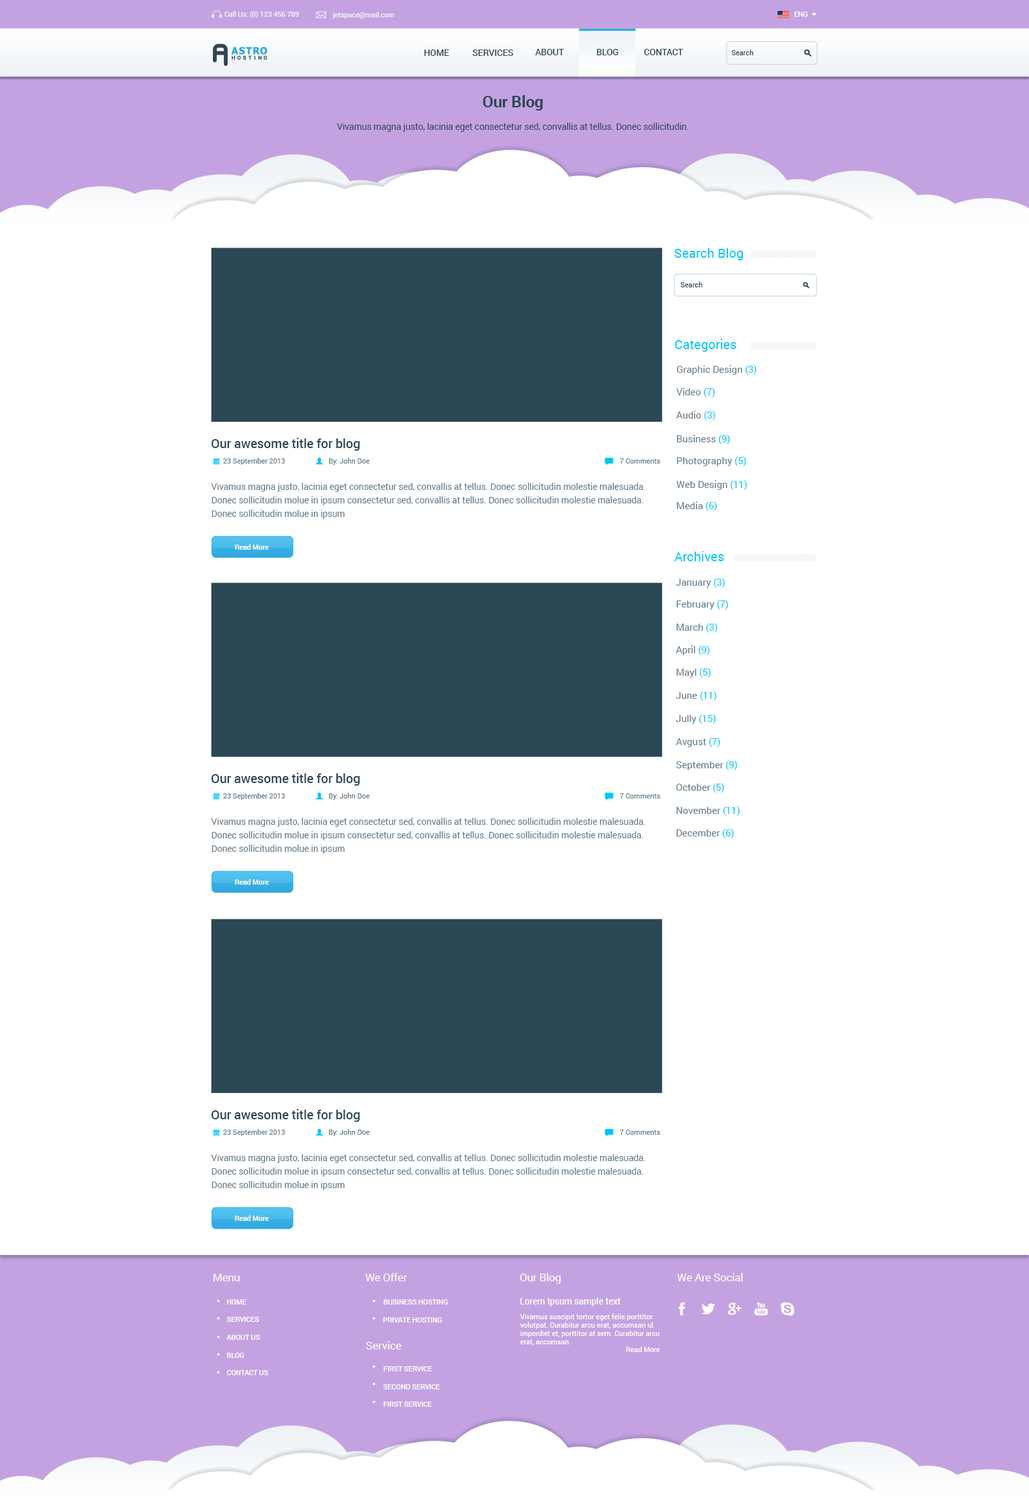
<style>
.page{position:relative;width:1029px;height:1498px;background:#ffffff}
.page>*{position:absolute;margin:0}
.t1{font:7.1px "Roboto-Medium";letter-spacing:-0.01em;color:#edf2f6}
.t2{font:7.1px "Roboto-Medium";letter-spacing:-0.01em;color:#ffffff}
.t3{font:9px "Roboto-Medium";letter-spacing:-0.01em;color:#2c4755}
.t4{font:7.1px "Roboto-Regular";color:#2c4755}
.t5{font:16.1px "Roboto-Bold";letter-spacing:-0.01em;color:#2c4755}
.t6{font:9px "Roboto-Regular";letter-spacing:-0.01em;color:#2c4755}
.t7{font:12.9px "Roboto-Regular";color:#00c7fc}
.t8{font:9.6px "Roboto-Regular";color:#637988}
.t9{font:9.6px "Roboto-Regular";color:#00c7fc}
.t10{font:12.9px "Roboto-Medium";letter-spacing:-0.01em;color:#2c4755}
.t11{font:7.1px "Roboto-Regular";color:#637988}
.t12{font:9px/13.5px "Roboto-Regular";letter-spacing:-0.01em;color:#637988}
.t13{font:10.9px "Roboto-Regular";letter-spacing:-0.01em;color:#ffffff}
.t14{font:9px "Roboto-Medium";letter-spacing:-0.01em;color:#ffffff}
.t15{font:7.1px "Roboto-Regular";color:#ffffff}
.t16{font:7.1px "Roboto-Regular";letter-spacing:-0.01em;color:#ffffff}
</style>
<div class="page">
<p class="t1" style="left:224px;top:11px;width:75px;height:7px">Call Us: (0) 123 456 789</p>
<p class="t1" style="left:332px;top:12px;width:62px;height:7px">jetspace@mail.com</p>
<p class="t2" style="left:794px;top:12px;width:13px;height:5px">ENG</p>
<p class="t3" style="left:424px;top:50px;width:25px;height:6px">HOME</p>
<p class="t3" style="left:473px;top:50px;width:40px;height:6px">SERVICES</p>
<p class="t3" style="left:535px;top:49px;width:29px;height:6px">ABOUT</p>
<p class="t3" style="left:597px;top:49px;width:21px;height:6px">BLOG</p>
<p class="t3" style="left:644px;top:49px;width:39px;height:6px">CONTACT</p>
<p class="t4" style="left:731px;top:50px;width:22px;height:5px">Search</p>
<p class="t5" style="left:483px;top:95px;width:60px;height:16px">Our Blog</p>
<p class="t6" style="left:337px;top:123px;width:351px;height:9px">Vivamus magna justo, lacinia eget consectetur sed, convallis at tellus. Donec sollicitudin.</p>
<p class="t7" style="left:674px;top:248px;width:69px;height:12px">Search Blog</p>
<p class="t4" style="left:680px;top:282px;width:22px;height:5px">Search</p>
<p class="t7" style="left:674px;top:339px;width:62px;height:13px">Categories</p>
<p class="t8" style="left:676px;top:365px;width:80px;height:10px">Graphic Design <span class="t9">(3)</span></p>
<p class="t8" style="left:676px;top:388px;width:39px;height:9px">Video <span class="t9">(7)</span></p>
<p class="t8" style="left:676px;top:411px;width:39px;height:9px">Audio <span class="t9">(3)</span></p>
<p class="t10" style="left:212px;top:438px;width:148px;height:13px">Our awesome title for blog</p>
<p class="t8" style="left:676px;top:435px;width:54px;height:9px">Business <span class="t9">(9)</span></p>
<p class="t11" style="left:223px;top:458px;width:62px;height:7px">23 September 2013</p>
<p class="t11" style="left:328px;top:458px;width:42px;height:7px">By: John Doe</p>
<p class="t11" style="left:620px;top:458px;width:40px;height:6px">7 Comments</p>
<p class="t8" style="left:676px;top:456px;width:70px;height:10px">Photography <span class="t9">(5)</span></p>
<p class="t12" style="left:211px;top:483px;width:434px;height:36px">Vivamus magna justo, lacinia eget consectetur sed, convallis at tellus. Donec sollicitudin molestie malesuada. <br>Donec sollicitudin molue in ipsum consectetur sed, convallis at tellus. Donec sollicitudin molestie malesuada. <br>Donec sollicitudin molue in ipsum</p>
<p class="t8" style="left:676px;top:480px;width:71px;height:10px">Web Design <span class="t9">(11)</span></p>
<p class="t8" style="left:676px;top:501px;width:41px;height:10px">Media <span class="t9">(6)</span></p>
<p class="t2" style="left:235px;top:544px;width:34px;height:6px">Read More</p>
<p class="t7" style="left:674px;top:551px;width:50px;height:10px">Archives</p>
<p class="t8" style="left:676px;top:578px;width:48px;height:10px">January <span class="t9">(3)</span></p>
<p class="t8" style="left:676px;top:600px;width:52px;height:9px">February <span class="t9">(7)</span></p>
<p class="t8" style="left:676px;top:623px;width:41px;height:10px">March <span class="t9">(3)</span></p>
<p class="t8" style="left:676px;top:645px;width:34px;height:10px">April <span class="t9">(9)</span></p>
<p class="t8" style="left:676px;top:668px;width:34px;height:10px">Mayl <span class="t9">(5)</span></p>
<p class="t8" style="left:676px;top:691px;width:40px;height:10px">June <span class="t9">(11)</span></p>
<p class="t8" style="left:676px;top:714px;width:40px;height:10px">Jully <span class="t9">(15)</span></p>
<p class="t8" style="left:676px;top:737px;width:44px;height:10px">Avgust <span class="t9">(7)</span></p>
<p class="t8" style="left:676px;top:760px;width:61px;height:10px">September <span class="t9">(9)</span></p>
<p class="t10" style="left:212px;top:773px;width:148px;height:13px">Our awesome title for blog</p>
<p class="t8" style="left:676px;top:783px;width:48px;height:10px">October <span class="t9">(5)</span></p>
<p class="t11" style="left:223px;top:793px;width:62px;height:7px">23 September 2013</p>
<p class="t11" style="left:328px;top:793px;width:42px;height:7px">By: John Doe</p>
<p class="t11" style="left:620px;top:793px;width:40px;height:5px">7 Comments</p>
<p class="t8" style="left:676px;top:806px;width:63px;height:10px">November <span class="t9">(11)</span></p>
<p class="t12" style="left:211px;top:818px;width:434px;height:36px">Vivamus magna justo, lacinia eget consectetur sed, convallis at tellus. Donec sollicitudin molestie malesuada. <br>Donec sollicitudin molue in ipsum consectetur sed, convallis at tellus. Donec sollicitudin molestie malesuada. <br>Donec sollicitudin molue in ipsum</p>
<p class="t8" style="left:676px;top:829px;width:58px;height:9px">December <span class="t9">(6)</span></p>
<p class="t2" style="left:235px;top:879px;width:34px;height:6px">Read More</p>
<p class="t10" style="left:212px;top:1109px;width:148px;height:13px">Our awesome title for blog</p>
<p class="t11" style="left:223px;top:1129px;width:62px;height:7px">23 September 2013</p>
<p class="t11" style="left:328px;top:1129px;width:42px;height:7px">By: John Doe</p>
<p class="t11" style="left:620px;top:1130px;width:40px;height:5px">7 Comments</p>
<p class="t12" style="left:211px;top:1154px;width:434px;height:36px">Vivamus magna justo, lacinia eget consectetur sed, convallis at tellus. Donec sollicitudin molestie malesuada. <br>Donec sollicitudin molue in ipsum consectetur sed, convallis at tellus. Donec sollicitudin molestie malesuada. <br>Donec sollicitudin molue in ipsum</p>
<p class="t2" style="left:235px;top:1215px;width:34px;height:6px">Read More</p>
<p class="t13" style="left:213px;top:1274px;width:27px;height:7px">Menu</p>
<p class="t13" style="left:365px;top:1273px;width:42px;height:8px">We Offer</p>
<p class="t13" style="left:519px;top:1273px;width:42px;height:11px">Our Blog</p>
<p class="t13" style="left:677px;top:1273px;width:65px;height:8px">We Are Social</p>
<p class="t2" style="left:227px;top:1299px;width:19px;height:5px">HOME</p>
<p class="t2" style="left:383px;top:1299px;width:65px;height:5px">BUSINESS HOSTING</p>
<p class="t14" style="left:520px;top:1297px;width:100px;height:9px">Lorem Ipsum sample text</p>
<p class="t15" style="left:519px;top:1313px;width:141px;height:33px">Vivamus suscipit tortor eget felis porttitor <br>volutpat. Curabitur arcu erat, accumsan id <br>imperdiet et, porttitor at sem. Curabitur arcu <br>erat, accumsan.</p>
<p class="t2" style="left:227px;top:1317px;width:32px;height:5px">SERVICES</p>
<p class="t2" style="left:383px;top:1317px;width:59px;height:5px">PRIVATE HOSTING</p>
<p class="t2" style="left:226px;top:1335px;width:34px;height:5px">ABOUT US</p>
<p class="t13" style="left:366px;top:1341px;width:35px;height:8px">Service</p>
<p class="t16" style="left:626px;top:1346px;width:34px;height:6px">Read More</p>
<p class="t2" style="left:227px;top:1353px;width:17px;height:5px">BLOG</p>
<p class="t2" style="left:226px;top:1370px;width:42px;height:5px">CONTACT US</p>
<p class="t2" style="left:383px;top:1366px;width:49px;height:5px">FIRST SERVICE</p>
<p class="t2" style="left:383px;top:1384px;width:57px;height:5px">SECOND SERVICE</p>
<p class="t2" style="left:383px;top:1401px;width:49px;height:6px">FIRST SERVICE</p>
</div>
